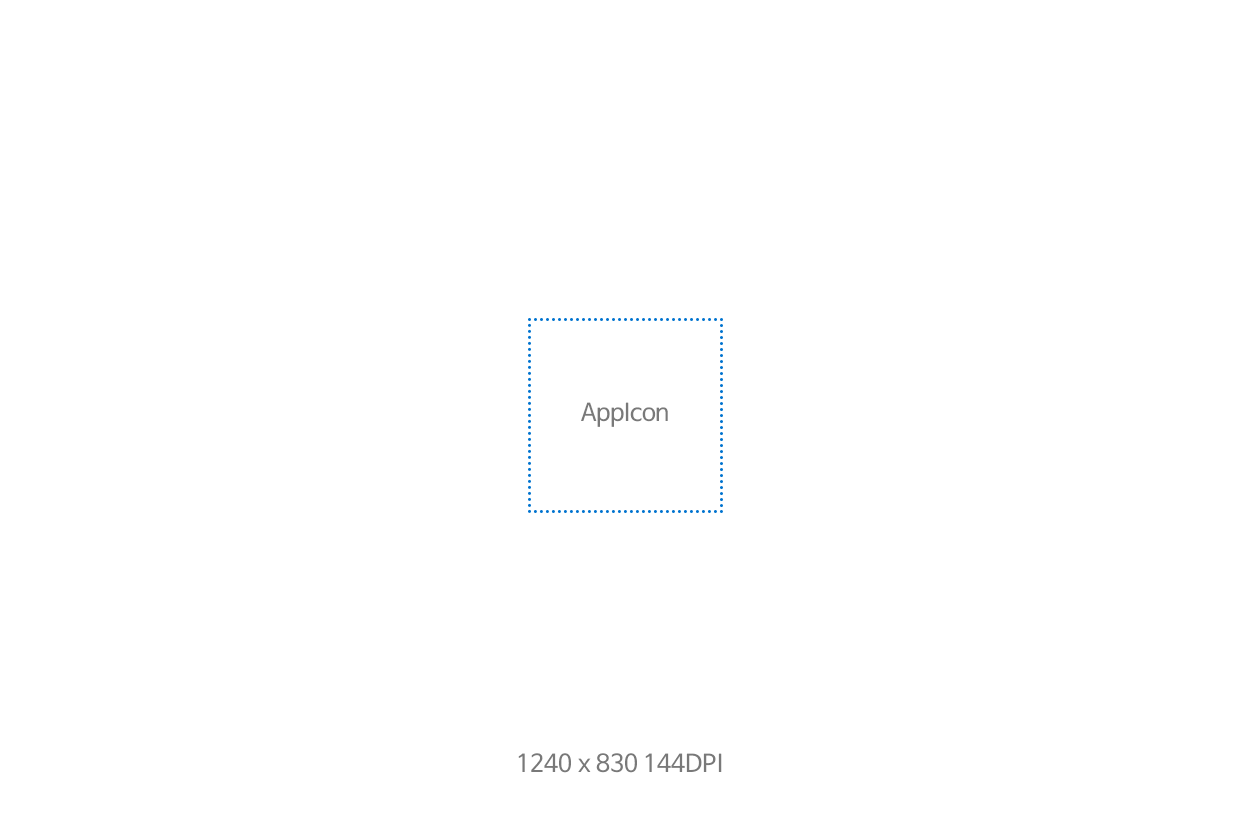
<style>
.page{position:relative;width:1240px;height:830px;background:#ffffff}
.page>*{position:absolute;margin:0}
.t1{font:24px "NanumBarunGothicOTF-YetHangul";color:#797979}
</style>
<div class="page">
<p class="t1" style="left:581px;top:402px;width:87px;height:25px">AppIcon</p>
<p class="t1" style="left:518px;top:753px;width:204px;height:20px">1240 x 830 144DPI</p>
</div>
